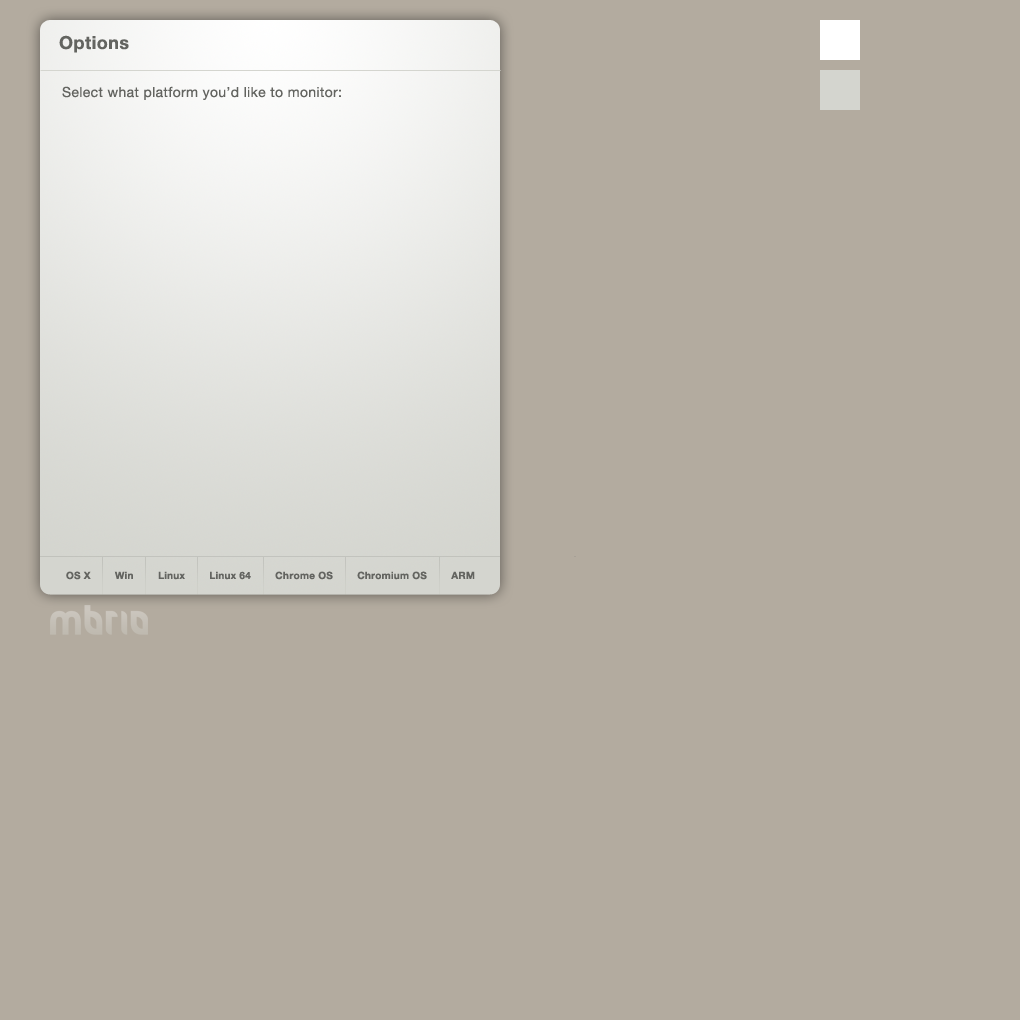
<style>
.page{position:relative;width:1020px;height:1020px;background:#b3ab9f}
.page>*{position:absolute;margin:0}
.t1{font:18px "HelveticaNeue-Bold";letter-spacing:0.025em;color:#636460}
.t2{font:14px "HelveticaNeue";letter-spacing:0.025em;color:#636460}
.t3{font:10px "HelveticaNeue-Bold";letter-spacing:0.025em;color:#636460}
</style>
<div class="page">
<p class="t1" style="left:59px;top:35px;width:70px;height:18px">Options</p>
<p class="t2" style="left:62px;top:86px;width:279px;height:14px">Select what platform you’d like to monitor:</p>
<p class="t3" style="left:66px;top:571px;width:409px;height:9px">OS X        Win        Linux        Linux 64        Chrome OS        Chromium OS        ARM</p>
</div>
